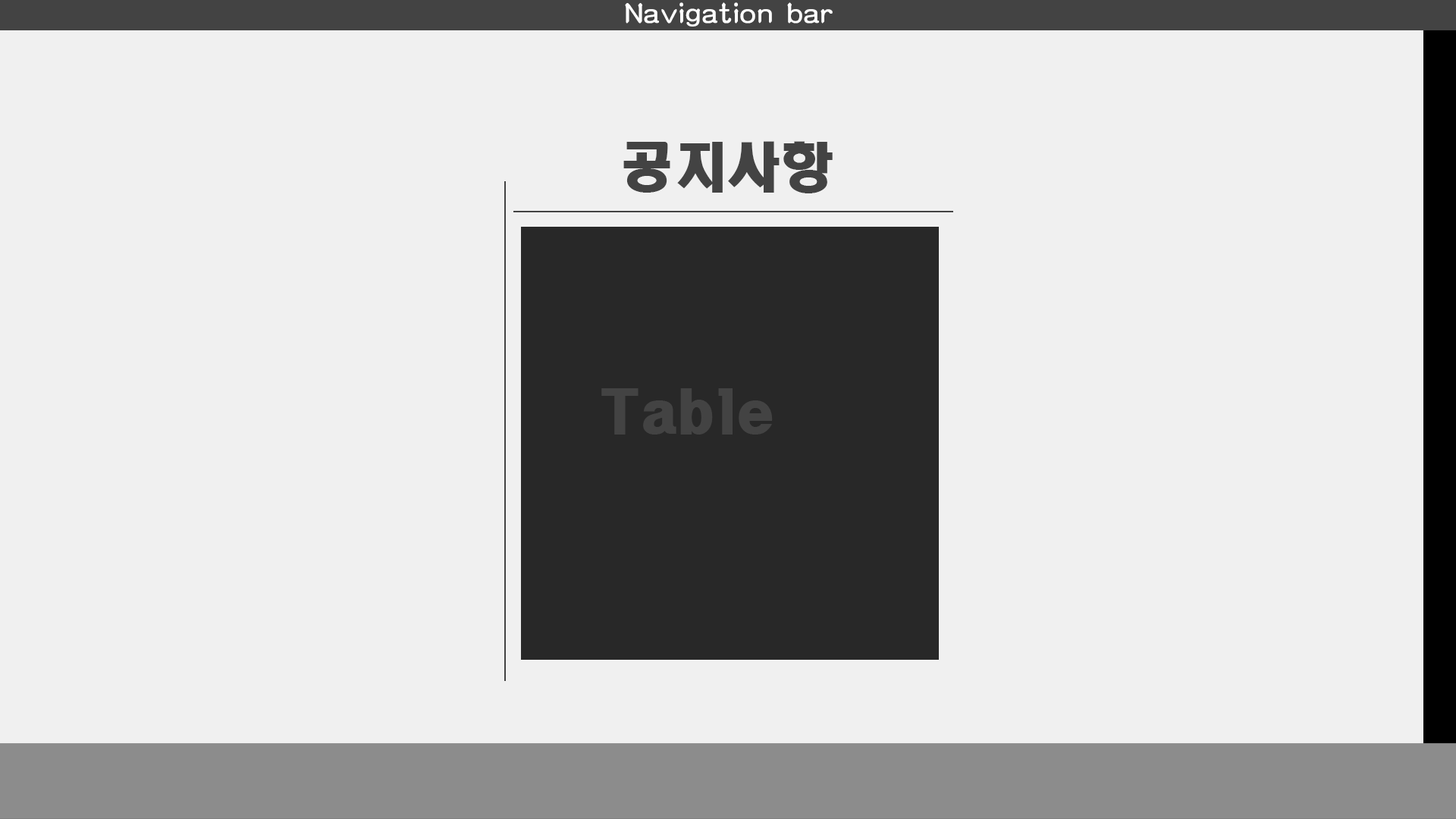
<style>
.page{position:relative;width:1456px;height:819px;background:#f0f0f0}
.page>*{position:absolute;margin:0}
.t1{font:26.5px "MDArt";color:#ffffff}
.t2{font:53.1px "HeadlineR-HM";color:#434343}
</style>
<div class="page">
<p class="t1" style="left:625px;top:2px;width:208px;height:25px">Navigation bar</p>
<p class="t2" style="left:623px;top:141px;width:210px;height:52px">공지사항</p>
<p class="t2" style="left:601px;top:388px;width:172px;height:47px">Table</p>
</div>
